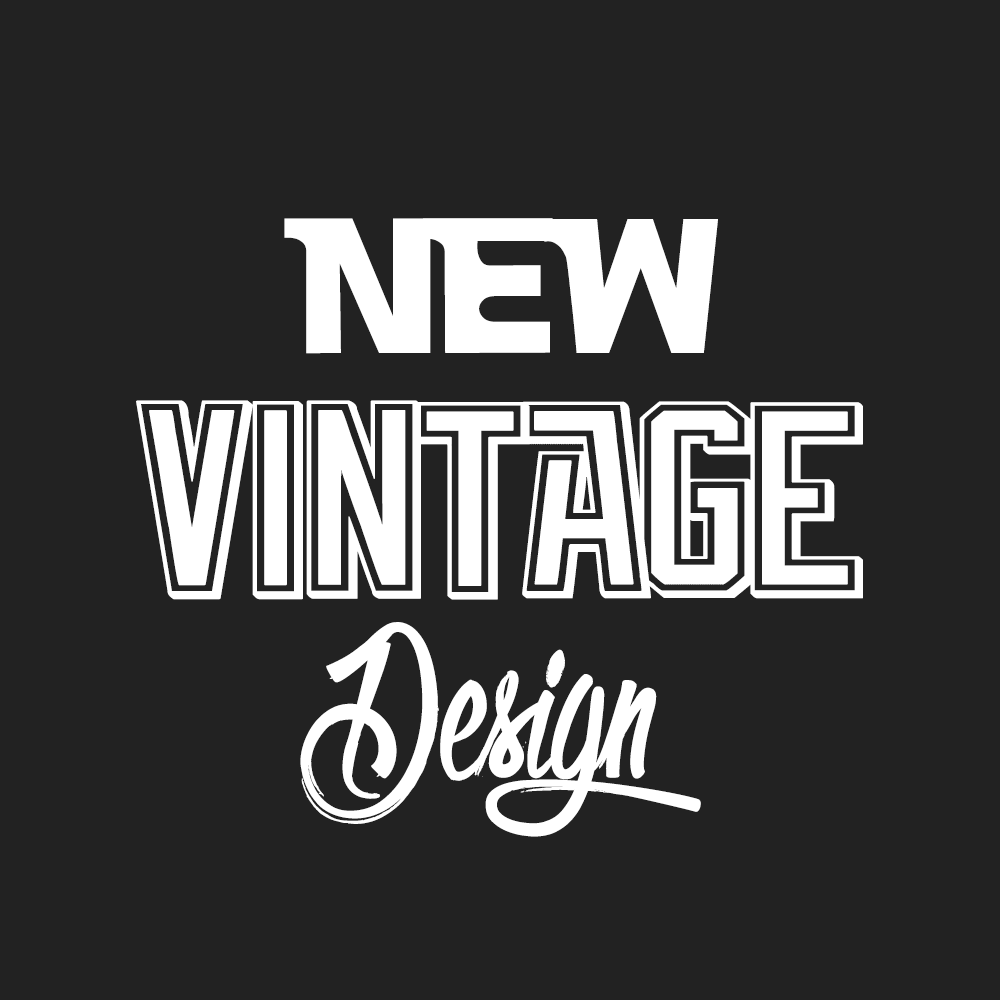
<style>
.page{position:relative;width:1000px;height:1000px;background:#222222}
.page>*{position:absolute;margin:0}
.t1{font:199.7px "Vintage";letter-spacing:-0.075em;color:#ffffff}
.t2{font:281.2px "TBL_Vintage";letter-spacing:-0.075em;color:#ffffff;scale:0.89 1}
.t3{font:275px "OlympicBranding";color:#ffffff}
</style>
<div class="page">
<p class="t1" style="left:284px;top:218px;width:434px;height:136px">NEW</p>
<p class="t2" style="left:136px;top:400px;width:727px;height:200px">VINTAGE</p>
<p class="t3" style="left:300px;top:622px;width:401px;height:215px">Design</p>
</div>
